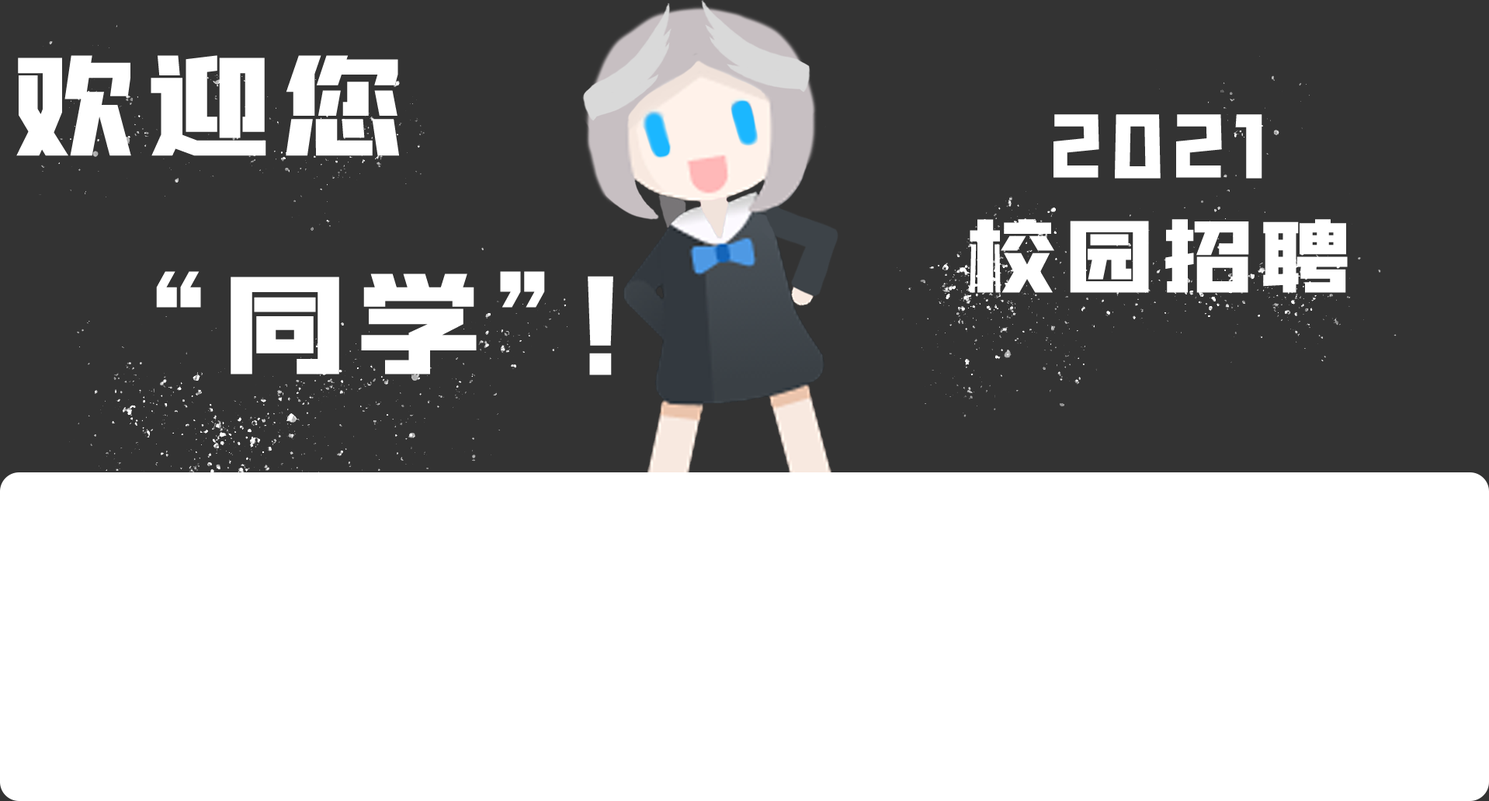
<style>
.page{position:relative;width:1489px;height:801px;background:#ffffff}
.page>*{position:absolute;margin:0}
.t1{font:124.8px "zihun143-zhengkuchaojihei";letter-spacing:0.075em;color:#ffffff}
.t2{font:91px/109.5px "zihun143-zhengkuchaojihei";letter-spacing:0.075em;color:#ffffff}
</style>
<div class="page">
<p class="t1" style="left:16px;top:55px;width:597px;height:320px;text-align:center">欢迎您<br>         “同学”！</p>
<p class="t2" style="left:970px;top:114px;width:378px;height:179px;text-align:center">2021<br>校园招聘</p>
</div>
